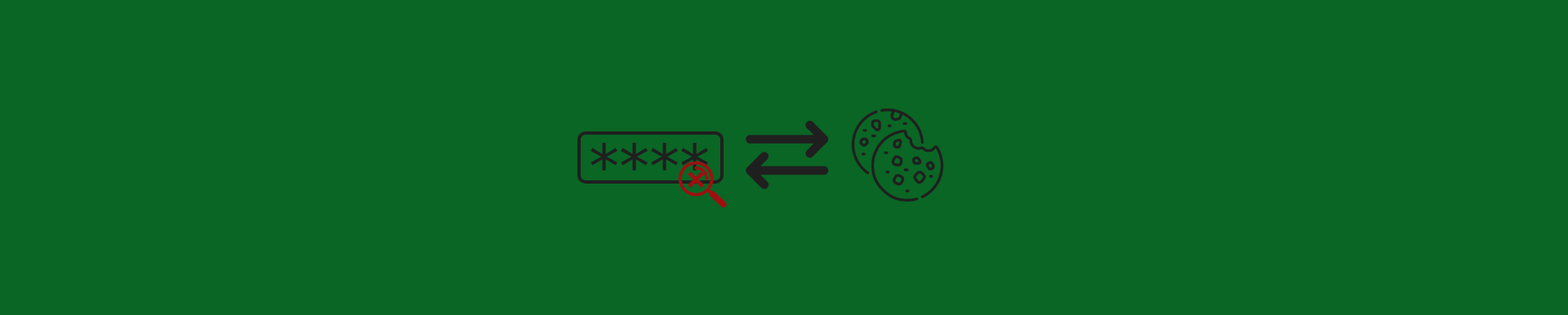
<style>
.page{position:relative;width:1568px;height:315px;background:#0a6624}
.page>*{position:absolute;margin:0}
.t1{font:60.4px "HACKED";color:#1f1f1f}
</style>
<div class="page">
<p class="t1" style="left:590px;top:143px;width:118px;height:28px">****</p>
</div>
